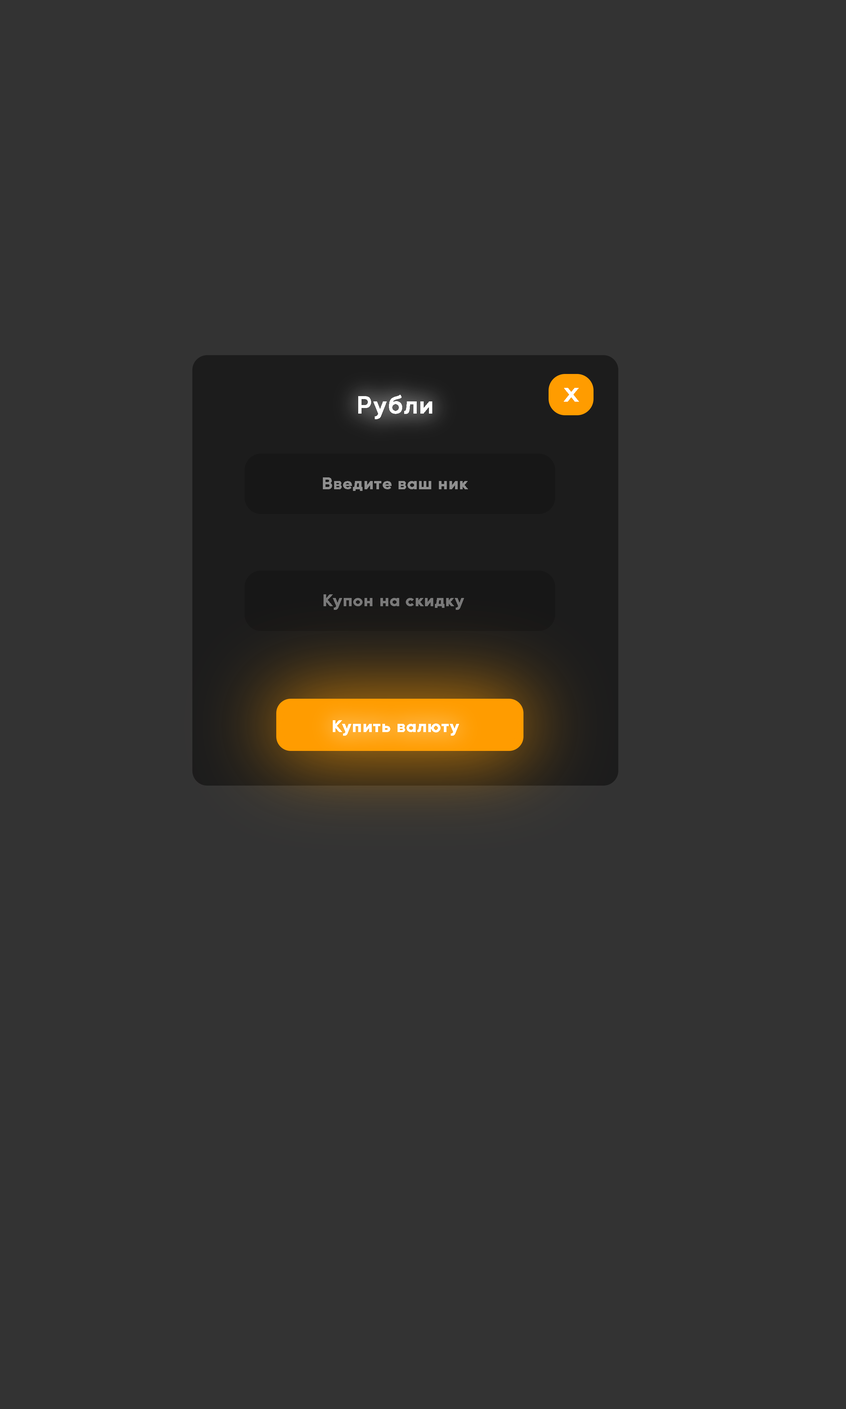
<style>
.page{position:relative;width:846px;height:1409px;background:#333333}
.page>*{position:absolute;margin:0}
.t1{font:19px "MusticaPro-SemiBold";letter-spacing:0.05em;color:#ffffff;font-weight:bold;scale:1.24 1}
.t2{font:23.8px "MusticaPro-SemiBold";letter-spacing:0.05em;color:#ffffff;font-weight:bold}
.t3{font:15.9px "MusticaPro-SemiBold";letter-spacing:0.05em;color:#8f8f8f;font-weight:bold}
.t4{font:15.9px "MusticaPro-SemiBold";letter-spacing:0.05em;color:#797979;font-weight:bold}
.t5{font:15.9px "MusticaPro-SemiBold";letter-spacing:0.05em;color:#ffffff;font-weight:bold}
</style>
<div class="page">
<p class="t1" style="left:564px;top:388px;width:15px;height:14px">X</p>
<p class="t2" style="left:358px;top:395px;width:74px;height:24px">Рубли</p>
<p class="t3" style="left:323px;top:478px;width:145px;height:13px">Введите ваш ник</p>
<p class="t4" style="left:324px;top:595px;width:140px;height:15px">Купон на скидку</p>
<p class="t5" style="left:333px;top:720px;width:126px;height:16px">Купить валюту</p>
</div>
